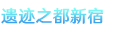
<style>
.page{position:relative;width:128px;height:32px;background:#ffffff}
.page>*{position:absolute;margin:0}
.t1{font:17.3px "HYWenHei-FEW";letter-spacing:0.025em;scale:0.97 1}
</style>
<div class="page">
<p class="t1" style="left:1px;top:7px;width:102px;height:17px">遗迹之都新宿</p>
</div>
